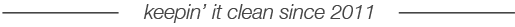
<style>
.page{position:relative;width:515px;height:27px;background:#ffffff}
.page>*{position:absolute;margin:0}
.t1{font:20.5px "HelveticaNeue-LightItalic";letter-spacing:-0.005em;color:#464646}
</style>
<div class="page">
<p class="t1" style="left:143px;top:4px;width:231px;height:19px">keepin’ it clean since 2011</p>
</div>
